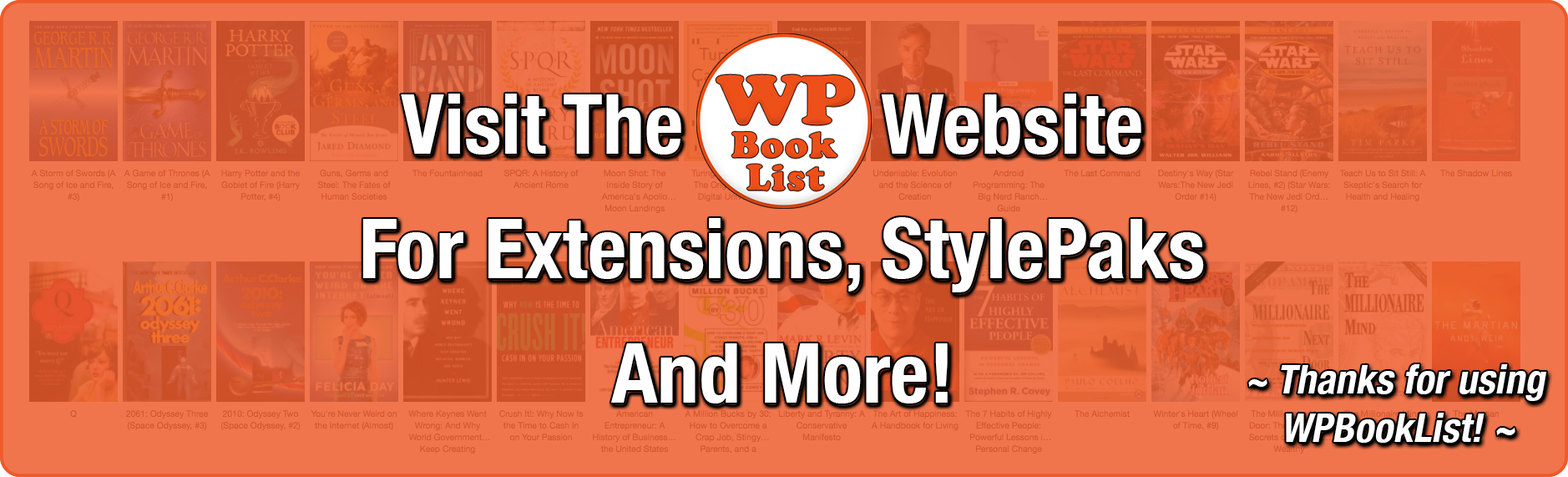
<style>
.page{position:relative;width:1568px;height:477px;background:#f1754c}
.page>*{position:absolute;margin:0}
.t1{font:83.5px/124.4px "HelveticaNeue-CondensedBold";color:#ffffff}
.t2{font:40.1px "HelveticaNeue-CondensedBold";color:#ffffff;font-style:italic}
</style>
<div class="page">
<p class="t1" style="left:363px;top:94px;width:841px;height:309px;text-align:center">Visit The          Website <br>For Extensions, StylePaks<br>And More!</p>
<p class="t2" style="left:1248px;top:364px;width:299px;height:79px;text-align:center">~ Thanks for using<br> WPBookList! ~</p>
</div>
